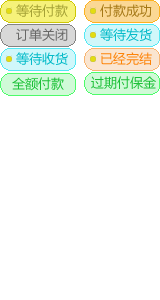
<style>
.page{position:relative;width:160px;height:300px;background:#ffffff}
.page>*{position:absolute;margin:0}
.t1{font:13px "MicrosoftYaHei";color:#a5a236;text-transform:uppercase}
.t2{font:13px "MicrosoftYaHei";color:#a57816;text-transform:uppercase}
.t3{font:13px "MicrosoftYaHei";color:#686867;text-transform:uppercase}
.t4{font:13px "MicrosoftYaHei";color:#06bbc9;text-transform:uppercase}
.t5{font:13px "MicrosoftYaHei";color:#fd8409;text-transform:uppercase}
.t6{font:13px "MicrosoftYaHei";color:#1cc037;text-transform:uppercase}
</style>
<div class="page">
<p class="t1" style="left:16px;top:4px;width:52px;height:13px">等待付款</p>
<p class="t2" style="left:100px;top:4px;width:52px;height:13px">付款成功</p>
<p class="t3" style="left:16px;top:28px;width:52px;height:13px">订单关闭</p>
<p class="t4" style="left:100px;top:28px;width:52px;height:13px">等待发货</p>
<p class="t4" style="left:16px;top:52px;width:52px;height:13px">等待收货</p>
<p class="t5" style="left:101px;top:52px;width:51px;height:13px">已经完结</p>
<p class="t6" style="left:12px;top:77px;width:52px;height:14px">全额付款</p>
<p class="t6" style="left:91px;top:76px;width:65px;height:13px">过期付保金</p>
</div>
